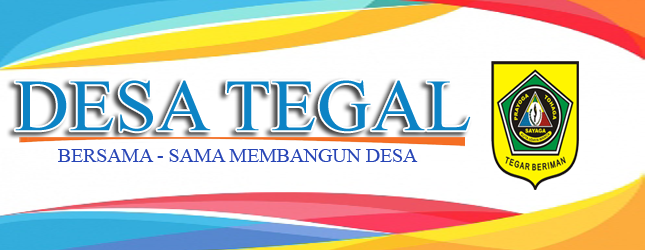
<style>
.page{position:relative;width:645px;height:250px;background:#ffffff}
.page>*{position:absolute;margin:0}
.t1{font:73.7px "TimesNewRomanPSMT";color:#0c83c5}
.t2{font:20.2px "TimesNewRomanPSMT";color:#2745b6}
</style>
<div class="page">
<p class="t1" style="left:15px;top:80px;width:456px;height:52px">DESA TEGAL</p>
<p class="t2" style="left:58px;top:149px;width:360px;height:13px">BERSAMA - SAMA MEMBANGUN DESA</p>
</div>
